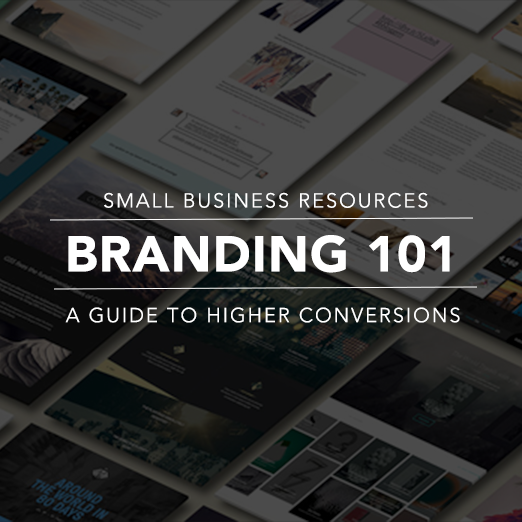
<style>
.page{position:relative;width:522px;height:522px}
.page>*{position:absolute;margin:0}
.t1{font:20px "Avenir-Light";letter-spacing:0.1em;color:#ffffff}
.t2{font:50px "Avenir-Black";letter-spacing:0.025em;color:#ffffff}
</style>
<div class="page">
<p class="t1" style="left:104px;top:192px;width:324px;height:16px">SMALL BUSINESS RESOURCES</p>
<p class="t2" style="left:68px;top:235px;width:382px;height:38px">BRANDING 101</p>
<p class="t1" style="left:65px;top:307px;width:395px;height:16px">A GUIDE TO HIGHER CONVERSIONS</p>
</div>
